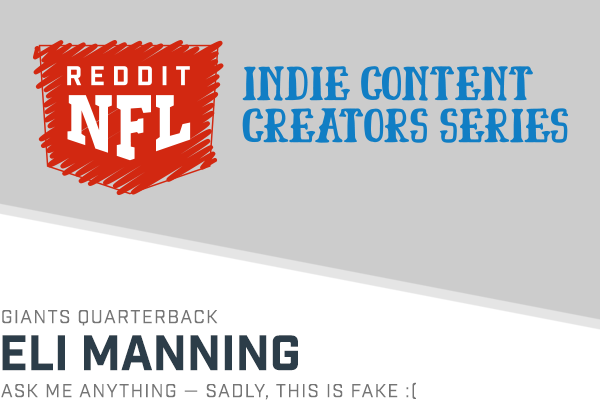
<style>
.page{position:relative;width:600px;height:400px;background:#cccccc}
.page>*{position:absolute;margin:0}
.t1{font:18px "Industry-Book";letter-spacing:0.08em;color:#757575;text-transform:uppercase}
.t2{font:48px "Industry-Bold";color:#2c3d49;text-transform:uppercase}
</style>
<div class="page">
<p class="t1" style="left:2px;top:310px;width:216px;height:16px">Giants Quarterback</p>
<p class="t2" style="left:2px;top:335px;width:296px;height:36px">ELI MANNING</p>
<p class="t1" style="left:1px;top:382px;width:415px;height:18px">ASK me ANYTHING — Sadly, this is fake :(</p>
</div>
